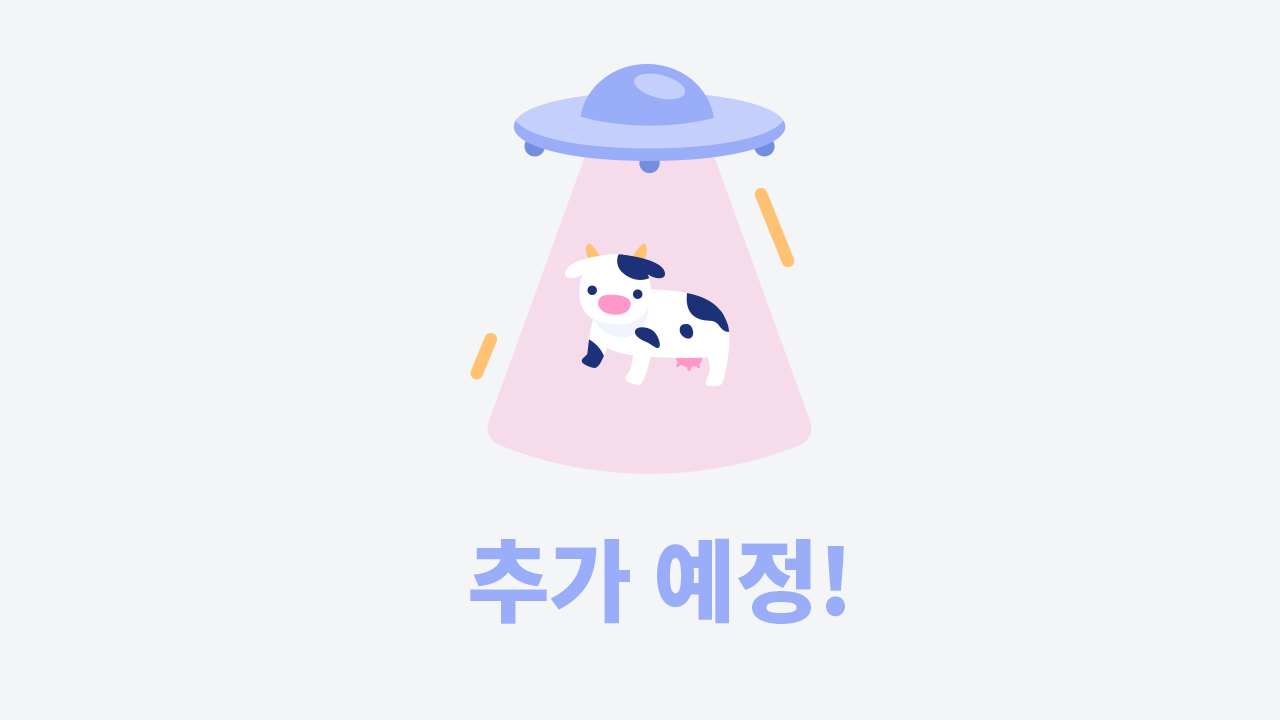
<style>
.page{position:relative;width:1280px;height:720px;background:#f3f5f7}
.page>*{position:absolute;margin:0}
.t1{font:90px "NotoSansKR-Black";color:#99adf9}
</style>
<div class="page">
<p class="t1" style="left:470px;top:538px;width:375px;height:86px">추가 예정!</p>
</div>
